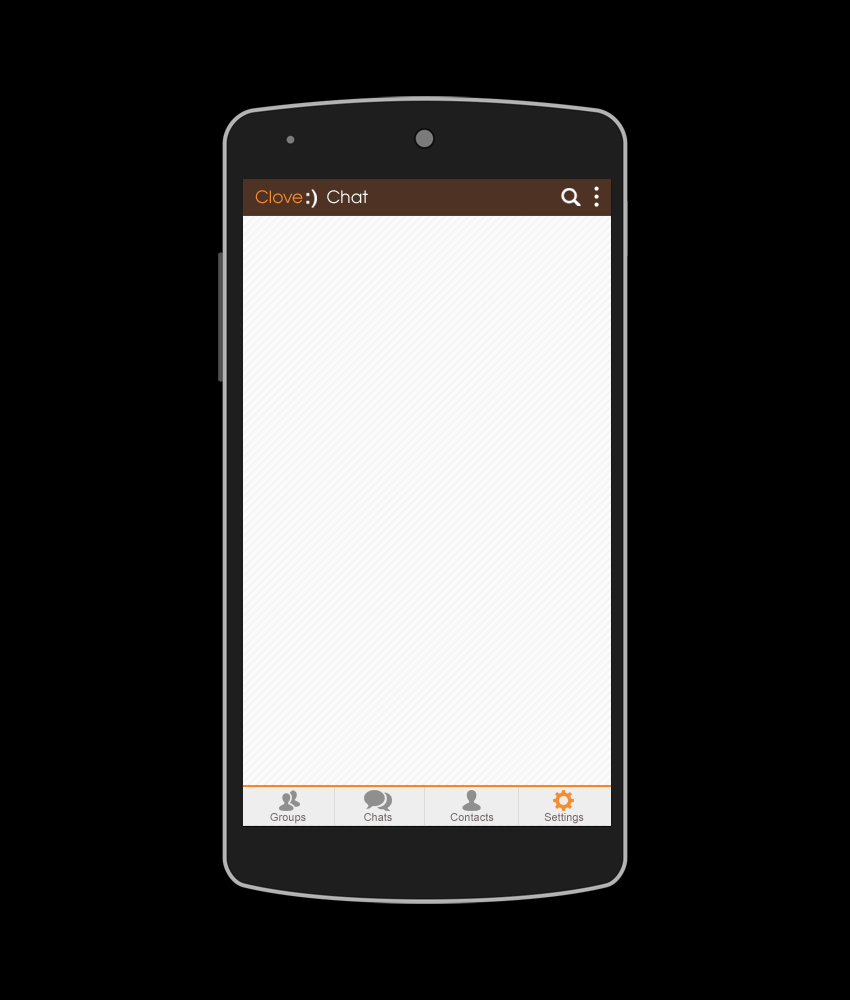
<style>
.page{position:relative;width:850px;height:1000px;background:#000000}
.page>*{position:absolute;margin:0}
.t1{font:17px "TeXGyreAdventor-Regular";color:#f68c2f}
.t2{font:17px "TeXGyreAdventor-Regular";color:#ffffff}
.t3{font:11px "ArialMT";color:#756a6a}
</style>
<div class="page">
<p class="t1" style="left:255px;top:190px;width:113px;height:14px">Clove     <span class="t2">Chat</span></p>
<p class="t3" style="left:270px;top:813px;width:36px;height:11px">Groups</p>
<p class="t3" style="left:364px;top:813px;width:28px;height:8px">Chats</p>
<p class="t3" style="left:450px;top:813px;width:44px;height:8px">Contacts</p>
<p class="t3" style="left:544px;top:813px;width:40px;height:11px">Settings</p>
</div>
